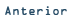
<style>
.page{position:relative;width:70px;height:22px;background:#ffffff}
.page>*{position:absolute;margin:0}
.t1{font:11.1px "OCRAStd";color:#264b65}
</style>
<div class="page">
<p class="t1" style="left:5px;top:6px;width:62px;height:9px">Anterior</p>
</div>
